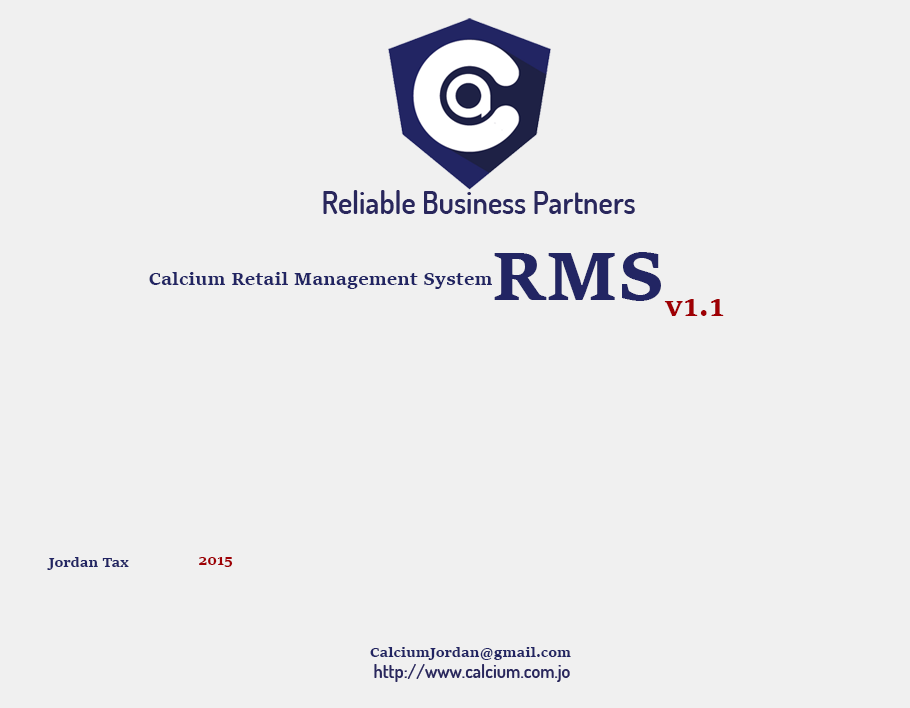
<style>
.page{position:relative;width:910px;height:708px;background:#f0f0f0}
.page>*{position:absolute;margin:0}
.t1{font:72px "SitkaSmall-Bold";color:#222563}
.t2{font:18px "SitkaSmall-Bold";color:#222563}
.t3{font:30.1px "SitkaSmall-Bold";color:#9f0004}
.t4{font:14px "SitkaSmall-Bold";color:#222563}
.t5{font:14px "SitkaSmall-Bold";color:#9f0004}
</style>
<div class="page">
<p class="t1" style="left:494px;top:252px;width:167px;height:49px">RMS</p>
<p class="t2" style="left:149px;top:272px;width:343px;height:17px">Calcium Retail Management System</p>
<p class="t3" style="left:664px;top:299px;width:60px;height:17px">v1.1</p>
<p class="t4" style="left:47px;top:557px;width:82px;height:13px">Jordan Tax</p>
<p class="t5" style="left:199px;top:557px;width:34px;height:10px">2015</p>
<p class="t4" style="left:370px;top:647px;width:201px;height:13px">CalciumJordan@gmail.com</p>
</div>
